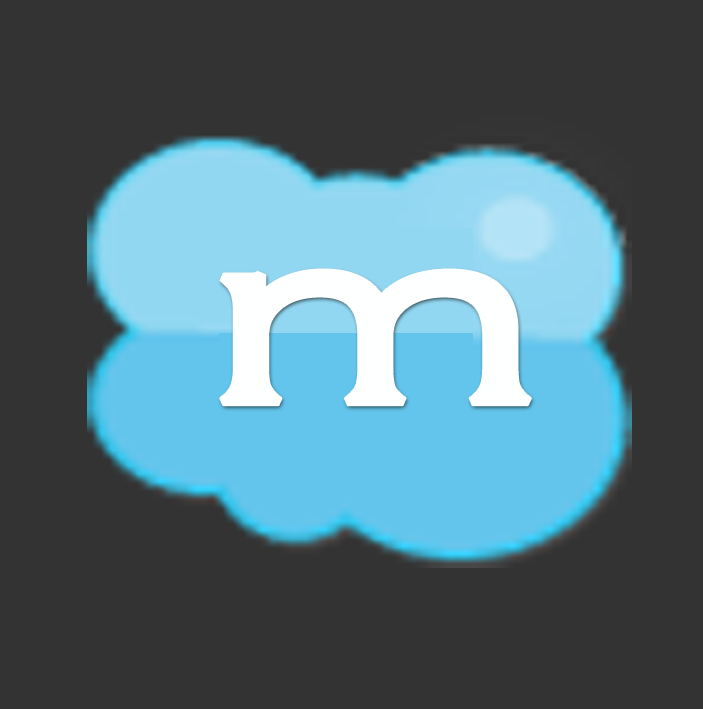
<style>
.page{position:relative;width:703px;height:709px;background:#333333}
.page>*{position:absolute;margin:0}
.t1{font:291.4px "Newtext-BkBT";letter-spacing:-0.05em;color:#feffff;font-weight:bold;scale:1.16 1}
</style>
<div class="page">
<p class="t1" style="left:220px;top:269px;width:311px;height:137px">m</p>
</div>
